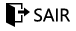
<style>
.page{position:relative;width:76px;height:31px;background:#ffffff}
.page>*{position:absolute;margin:0}
.t1{font:18px "LeelawadeeUI";color:#000000}
</style>
<div class="page">
<p class="t1" style="left:34px;top:8px;width:36px;height:14px">SAIR</p>
</div>
